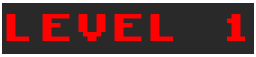
<style>
.page{position:relative;width:256px;height:57px;background:#292929}
.page>*{position:absolute;margin:0}
.t1{font:36px "KongtextRegular";color:#ff0101}
</style>
<div class="page">
<p class="t1" style="left:6px;top:14px;width:239px;height:27px">LEVEL 1</p>
</div>
